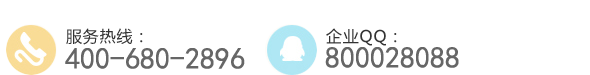
<style>
.page{position:relative;width:590px;height:75px;background:#ffffff}
.page>*{position:absolute;margin:0}
.t1{font:16px "MicrosoftYaHei";letter-spacing:0.05em;color:#333333}
.t2{font:30px "SimHei";color:#666666}
</style>
<div class="page">
<p class="t1" style="left:66px;top:28px;width:77px;height:17px">服务热线：</p>
<p class="t1" style="left:326px;top:28px;width:71px;height:18px">企业QQ：</p>
<p class="t2" style="left:65px;top:48px;width:180px;height:21px">400-680-2896</p>
<p class="t2" style="left:325px;top:47px;width:134px;height:21px">800028088</p>
</div>
